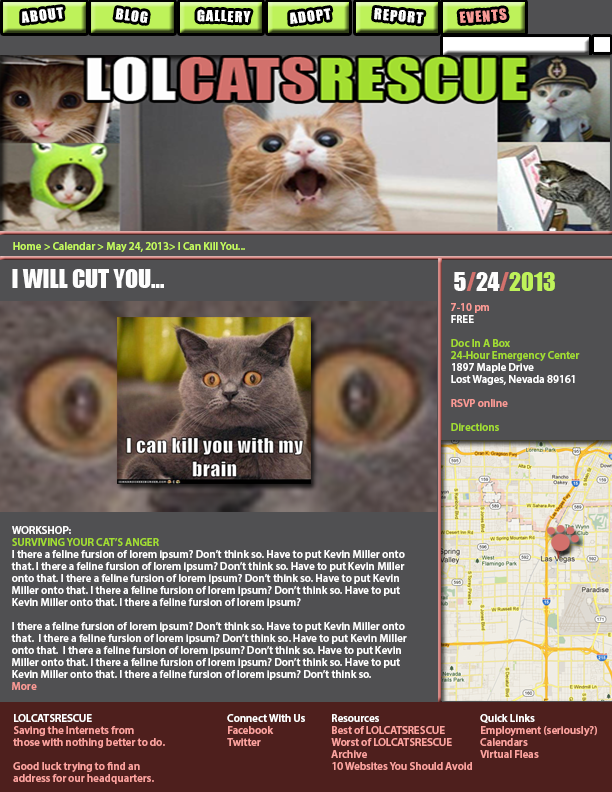
<style>
.page{position:relative;width:612px;height:792px;background:#505052}
.page>*{position:absolute;margin:0}
.t1{font:14px "Impact";letter-spacing:0.075em;color:#ffffff;scale:1.03 1}
.t2{font:14px "Impact";letter-spacing:0.075em;color:#fdfdfd;scale:1.03 1}
.t3{font:14px "Impact";letter-spacing:0.075em;color:#f99b96;scale:1.03 1}
.t4{font:11px "MyriadPro-Semibold";color:#c3f95d}
.t5{font:24px "Impact";color:#fdfdfd}
.t6{font:24px "Impact";color:#bef25a}
.t7{font:24px "Impact";color:#d2716c}
.t8{font:11px/12px "MyriadPro-Semibold";color:#ffffff}
.t9{font:11px/12px "MyriadPro-Semibold";color:#fa9a95}
.t10{font:11px/12px "MyriadPro-Semibold";color:#fdfdfd}
.t11{font:11px/12px "MyriadPro-Semibold";color:#a2dd31}
.t12{font:11px/12px "MyriadPro-Semibold";color:#fda29e}
</style>
<div class="page">
<p class="t1" style="left:22px;top:7px;width:41px;height:16px;rotate:-7deg">ABOUT</p>
<p class="t2" style="left:115px;top:8px;width:33px;height:15px;rotate:7deg">BLOG</p>
<p class="t1" style="left:197px;top:9px;width:54px;height:14px;rotate:2deg">GALLERY</p>
<p class="t1" style="left:290px;top:8px;width:41px;height:16px;rotate:-8deg">ADOPT</p>
<p class="t2" style="left:374px;top:8px;width:50px;height:16px;rotate:5deg">REPORT</p>
<p class="t3" style="left:459px;top:8px;width:48px;height:15px;rotate:-4deg">EVENTS</p>
<p class="t4" style="left:13px;top:242px;width:232px;height:10px">Home &gt; Calendar &gt; May 24, 2013&gt; I Can Kill You...</p>
<p class="t5" style="left:12px;top:269px;width:152px;height:19px">I WILL CUT YOU...</p>
<p class="t6" style="left:454px;top:272px;width:101px;height:19px"><span class="t5">5</span><span class="t7">/</span><span class="t5">24</span><span class="t7">/</span>2013</p>
<p class="t8" style="left:451px;top:303px;width:129px;height:128px"><span class="t9">7-10 pm<br></span><span class="t10">FREE<br></span><span class="t11"><br>Doc In A Box<br>24-Hour Emergency Center<br></span>1897 Maple Drive<br>Lost Wages, Nevada 89161<br> <br><span class="t9">RSVP online<br><br></span><span class="t11">Directions</span></p>
<p class="t8" style="left:11px;top:526px;width:396px;height:164px"><span class="t10">WORKSHOP: <br></span><span class="t11">SURVIVING YOUR CAT’S ANGER<br></span>I there a feline fursion of lorem ipsum? Don’t think so. Have to put Kevin Miller onto that. I there a feline fursion of lorem ipsum? Don’t think so. Have to put Kevin Miller onto that. I there a feline fursion of lorem ipsum? Don’t think so. Have to put Kevin Miller onto that. I there a feline fursion of lorem ipsum? Don’t think so. Have to put Kevin Miller onto that. I there a feline fursion of lorem ipsum? <br><br>I there a feline fursion of lorem ipsum? Don’t think so. Have to put Kevin Miller onto that.  I there a feline fursion of lorem ipsum? Don’t think so. Have to put Kevin Miller onto that.  I there a feline fursion of lorem ipsum? Don’t think so. Have to put Kevin Miller onto that. I there a feline fursion of lorem ipsum? Don’t think so. Have to put Kevin Miller onto that. I there a feline fursion of lorem ipsum? Don’t think so.  <br><span class="t9">More<br></span><br>I there a feline fursion of lorem ipsum? Don’t think so. Have to put Kevin Miller onto that.  I there a feline fursion of lorem ipsum? Don’t think so. Have to put Kevin Miller onto that.  I there a feline fursion of lorem ipsum? Don’t think so. Have to put Kevin Miller onto that.</p>
<p class="t12" style="left:13px;top:714px;width:152px;height:70px"><span class="t8">LOLCATSRESCUE<br></span>Saving the Internets from <br>those with nothing better to do.<br><br>Good luck trying to find an <br>address for our headquarters.</p>
<p class="t12" style="left:227px;top:714px;width:78px;height:32px"><span class="t8">Connect With Us<br></span>Facebook<br>Twitter</p>
<p class="t12" style="left:331px;top:714px;width:141px;height:56px"><span class="t8">Resources<br></span>Best of LOLCATSRESCUE<br>Worst of LOLCATSRESCUE<br>Archive<br>10 Websites You Should Avoid</p>
<p class="t12" style="left:480px;top:714px;width:117px;height:44px"><span class="t8">Quick Links<br></span>Employment (seriously?)<br>Calendars<br>Virtual Fleas</p>
</div>
